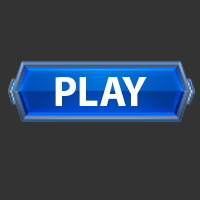
<style>
.page{position:relative;width:200px;height:200px;background:#333333}
.page>*{position:absolute;margin:0}
.t1{font:41.7px "MyriadPro-Bold";color:#ffffff}
</style>
<div class="page">
<p class="t1" style="left:55px;top:77px;width:92px;height:29px">PLAY</p>
</div>
